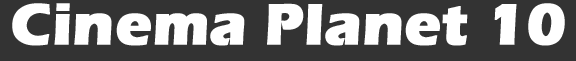
<style>
.page{position:relative;width:576px;height:61px;background:#333333}
.page>*{position:absolute;margin:0}
.t1{font:60px "ErasITC-Bold";color:#ffffff;font-weight:bold}
</style>
<div class="page">
<p class="t1" style="left:12px;top:3px;width:553px;height:43px">Cinema Planet 10</p>
</div>
